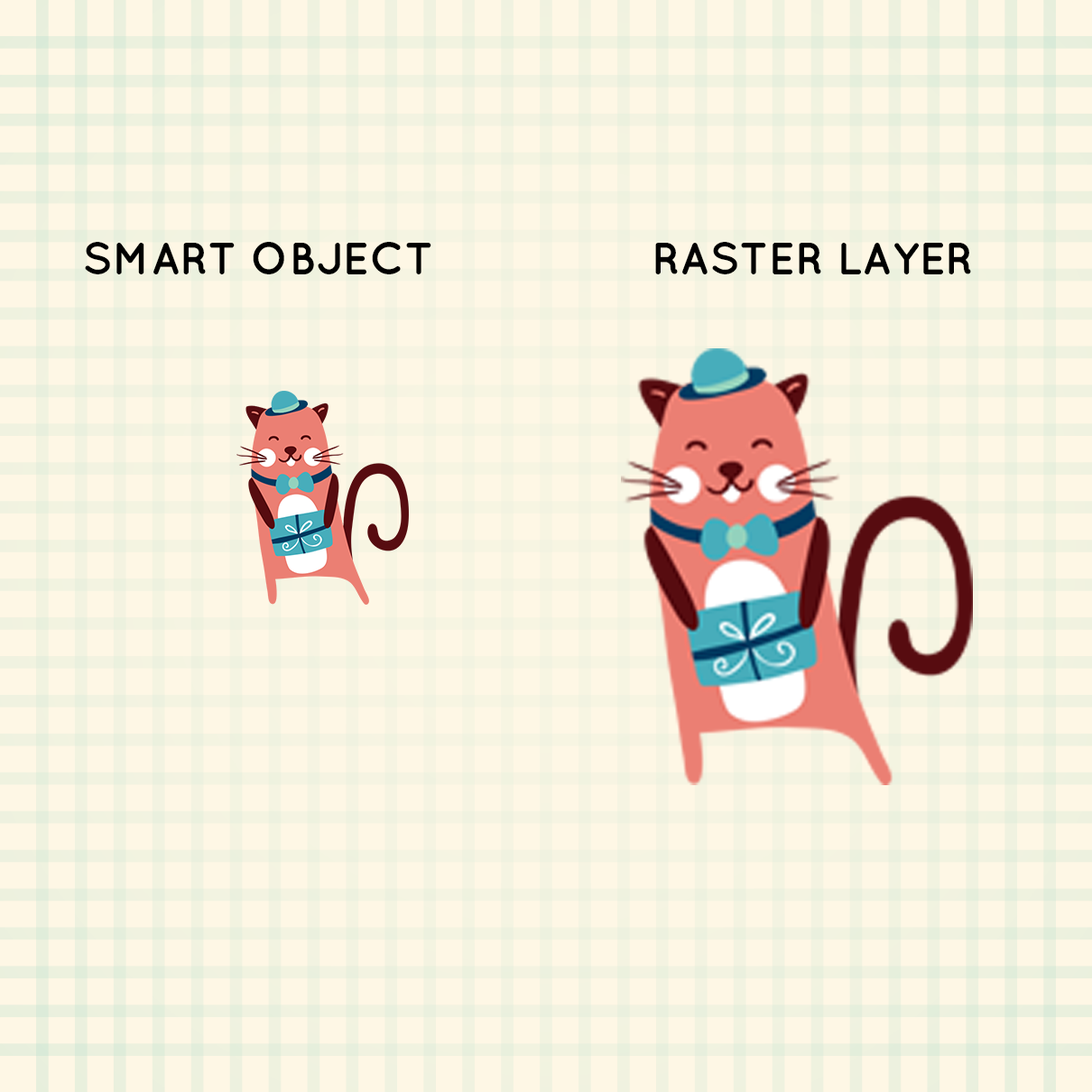
<style>
.page{position:relative;width:1092px;height:1092px;background:#fef7e5}
.page>*{position:absolute;margin:0}
.t1{font:45.1px "Quicksand-Bold";color:#000000}
</style>
<div class="page">
<p class="t1" style="left:85px;top:242px;width:346px;height:32px">SMART OBJECT</p>
<p class="t1" style="left:655px;top:242px;width:316px;height:32px">RASTER LAYER</p>
</div>
